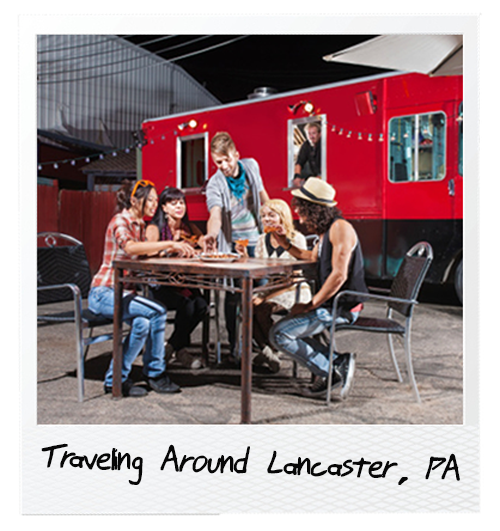
<style>
.page{position:relative;width:500px;height:531px}
.page>*{position:absolute;margin:0}
.t1{font:39.4px "JohnnyMacScrawlBRK";letter-spacing:-0.04em;color:#070707}
</style>
<div class="page">
<p class="t1" style="left:41px;top:443px;width:419px;height:42px;rotate:2deg">Traveling Around Lancaster, PA</p>
</div>
